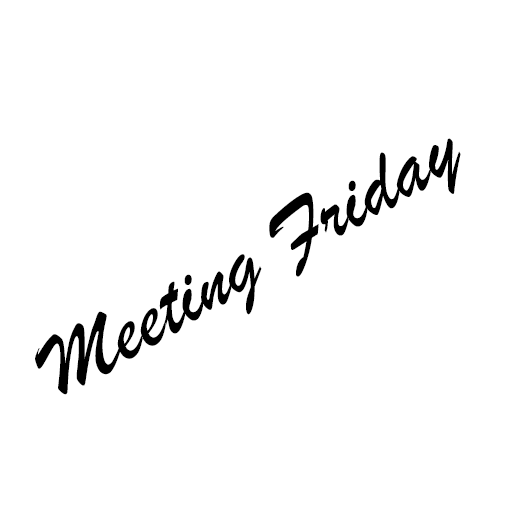
<style>
.page{position:relative;width:512px;height:512px;background:#ffffff}
.page>*{position:absolute;margin:0}
.t1{font:90px "BrushScriptMT";color:#000000}
</style>
<div class="page">
<p class="t1" style="left:35px;top:138px;width:426px;height:257px;rotate:-30deg">Meeting Friday</p>
</div>
